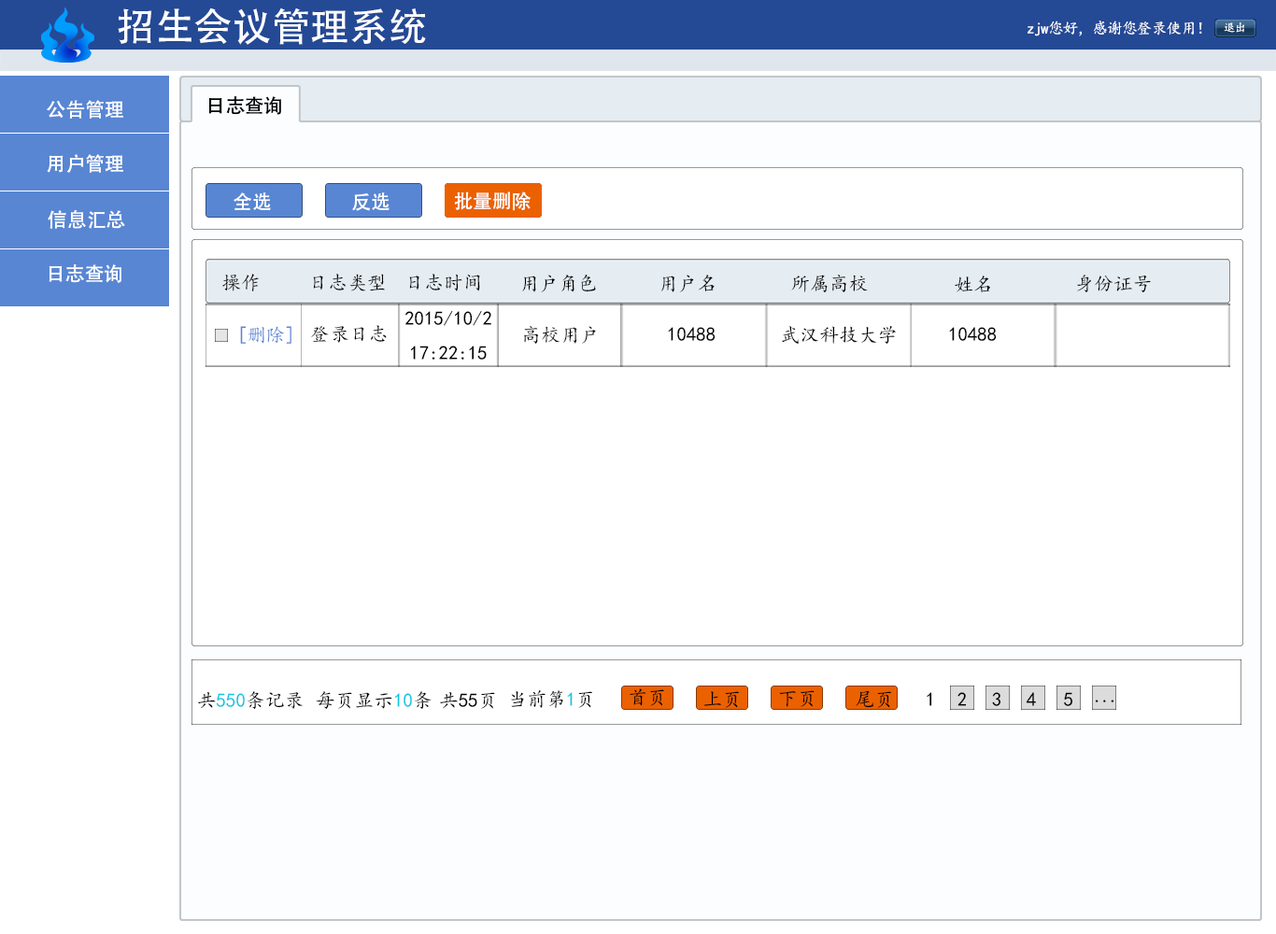
<style>
.page{position:relative;width:1276px;height:934px;background:#ffffff}
.page>*{position:absolute;margin:0}
.t1{font:38.9px "AdobeHeitiStd-Regular";color:#ffffff}
.t2{font:15.6px "KaiTi";letter-spacing:-0.05em;color:#ffffff}
.t3{font:11.7px "KaiTi";letter-spacing:-0.05em;color:#ffffff}
.t4{font:19.5px "AdobeHeitiStd-Regular";color:#fefefe}
.t5{font:19.5px "AdobeHeitiStd-Regular";color:#000000}
.t6{font:19.5px "AdobeHeitiStd-Regular";color:#ffffff}
.t7{font:19.5px "KaiTi";color:#000000}
.t8{font:19.5px "KaiTi";color:#5886d3}
.t9{font:19.5px "KaiTi";color:#10c6e1}
.t10{font:19.5px "KaiTi";letter-spacing:-0.1em;color:#000000}
</style>
<div class="page">
<p class="t1" style="left:118px;top:7px;width:308px;height:38px">招生会议管理系统</p>
<p class="t2" style="left:1028px;top:21px;width:174px;height:15px">zjw您好，感谢您登录使用！</p>
<p class="t3" style="left:1224px;top:22px;width:21px;height:11px">退出</p>
<p class="t4" style="left:47px;top:100px;width:76px;height:19px">公告管理</p>
<p class="t5" style="left:208px;top:96px;width:73px;height:19px">日志查询</p>
<p class="t4" style="left:47px;top:154px;width:76px;height:19px">用户管理</p>
<p class="t6" style="left:234px;top:192px;width:37px;height:18px">全选</p>
<p class="t6" style="left:352px;top:192px;width:38px;height:19px">反选</p>
<p class="t6" style="left:454px;top:192px;width:77px;height:19px">批量删除</p>
<p class="t4" style="left:48px;top:210px;width:77px;height:19px">信息汇总</p>
<p class="t4" style="left:49px;top:264px;width:72px;height:19px">日志查询</p>
<p class="t7" style="left:222px;top:274px;width:37px;height:18px">操作</p>
<p class="t7" style="left:313px;top:274px;width:72px;height:18px">日志类型</p>
<p class="t7" style="left:409px;top:274px;width:71px;height:18px">日志时间</p>
<p class="t7" style="left:522px;top:275px;width:74px;height:17px">用户角色</p>
<p class="t7" style="left:661px;top:275px;width:54px;height:17px">用户名</p>
<p class="t7" style="left:791px;top:275px;width:77px;height:17px">所属高校</p>
<p class="t7" style="left:955px;top:276px;width:35px;height:16px">姓名</p>
<p class="t7" style="left:1077px;top:275px;width:74px;height:17px">身份证号</p>
<p class="t7" style="left:405px;top:310px;width:86px;height:50px;text-align:center">2015/10/2<br>17:22:15</p>
<p class="t8" style="left:240px;top:326px;width:52px;height:18px">[删除]</p>
<p class="t7" style="left:311px;top:325px;width:76px;height:18px">登录日志</p>
<p class="t7" style="left:524px;top:326px;width:72px;height:18px">高校用户</p>
<p class="t7" style="left:668px;top:327px;width:48px;height:14px">10488</p>
<p class="t7" style="left:782px;top:326px;width:114px;height:18px">武汉科技大学</p>
<p class="t7" style="left:949px;top:327px;width:48px;height:14px">10488</p>
<p class="t7" style="left:630px;top:689px;width:34px;height:17px">首页</p>
<p class="t9" style="left:198px;top:691px;width:105px;height:18px"><span class="t7">共</span>550<span class="t7">条记录</span></p>
<p class="t7" style="left:316px;top:691px;width:116px;height:18px">每页显示<span class="t9">10</span>条</p>
<p class="t9" style="left:440px;top:692px;width:55px;height:17px"><span class="t7">共</span>55<span class="t7">页</span></p>
<p class="t7" style="left:511px;top:690px;width:81px;height:18px">当前第<span class="t9">1</span>页</p>
<p class="t7" style="left:704px;top:691px;width:35px;height:17px">上页</p>
<p class="t7" style="left:779px;top:690px;width:36px;height:17px">下页</p>
<p class="t7" style="left:856px;top:690px;width:35px;height:18px">尾页</p>
<p class="t7" style="left:927px;top:692px;width:5px;height:14px">1</p>
<p class="t7" style="left:958px;top:692px;width:9px;height:14px">2</p>
<p class="t7" style="left:992px;top:692px;width:10px;height:14px">3</p>
<p class="t7" style="left:1026px;top:692px;width:10px;height:14px">4</p>
<p class="t7" style="left:1064px;top:692px;width:10px;height:14px">5</p>
<p class="t10" style="left:1095px;top:700px;width:20px;height:3px">...</p>
</div>
